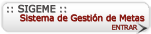
<style>
.page{position:relative;width:151px;height:34px}
.page>*{position:absolute;margin:0}
.t1{font:9.5px "Verdana";letter-spacing:-0.025em;color:#565454;font-weight:bold}
.t2{font:9.5px "Verdana";letter-spacing:-0.025em;color:#4b4848;font-weight:bold}
.t3{font:8.5px "Verdana";letter-spacing:-0.025em;color:#881811;font-weight:bold}
.t4{font:6.3px "Verdana";letter-spacing:-0.025em;font-weight:bold}
.t5{font:6.3px "Verdana";letter-spacing:-0.025em;color:#881811;font-weight:bold}
.t6{font:10.9px "Arrows1-Regular";color:#3f3f3f;text-transform:uppercase}
</style>
<div class="page">
<p class="t1" style="left:7px;top:5px;width:60px;height:8px">:: SIGEME ::</p>
<p class="t2" style="left:7px;top:4px;width:59px;height:9px">:: SIGEME ::</p>
<p class="t3" style="left:20px;top:14px;width:125px;height:8px">Sistema de Gestión de Metas</p>
<p class="t3" style="left:20px;top:13px;width:124px;height:8px">Sistema de Gestión de Metas</p>
<p class="t4" style="left:112px;top:25px;width:26px;height:5px">ENTRAR</p>
<p class="t5" style="left:112px;top:24px;width:26px;height:6px">ENTRAR</p>
<p class="t6" style="left:136px;top:22px;width:12px;height:12px">r</p>
</div>
